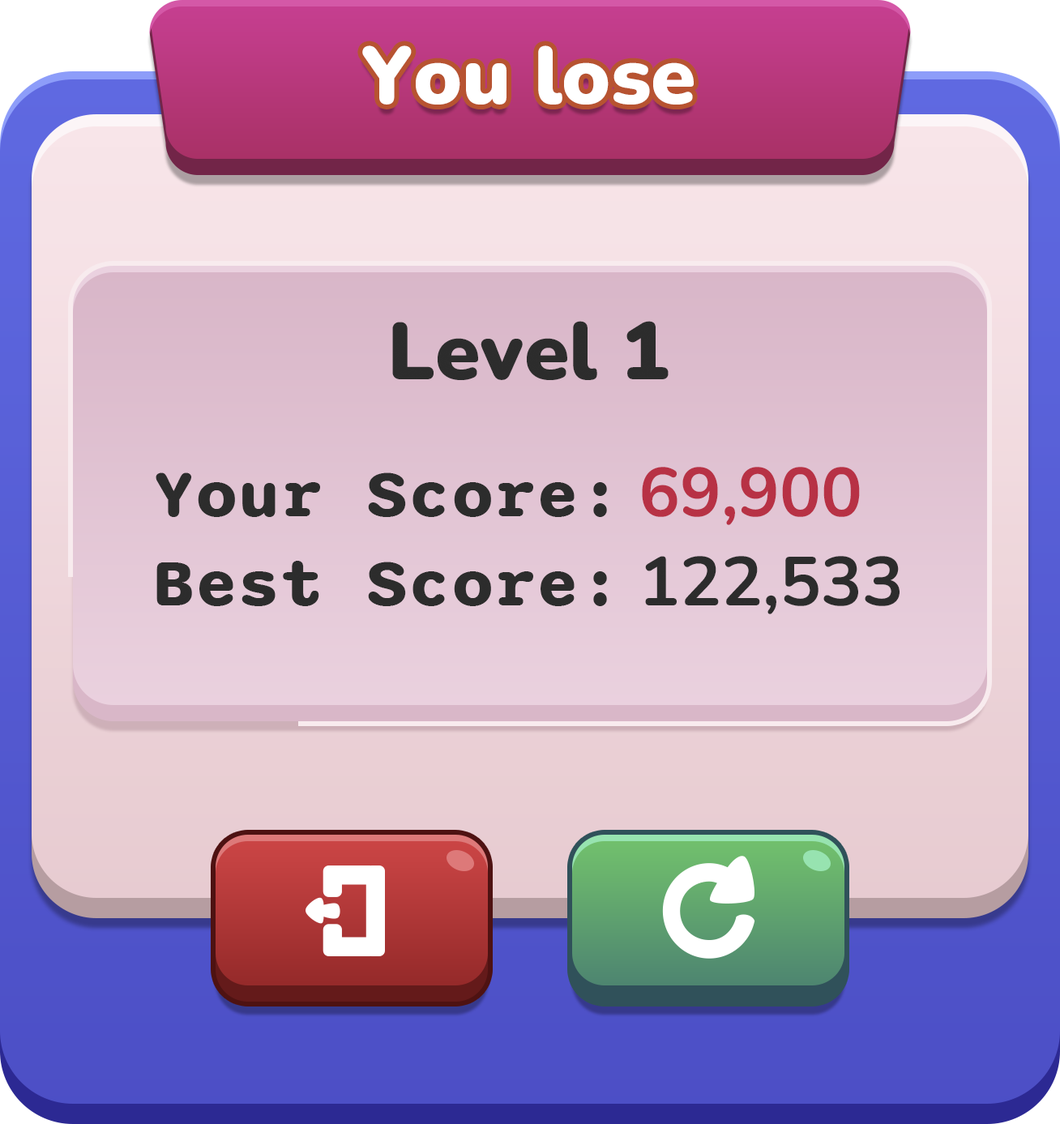
<style>
.page{position:relative;width:1060px;height:1124px}
.page>*{position:absolute;margin:0}
.t1{font:81.1px "Nunito-Black";color:#ffffff}
.t2{font:81.1px "Nunito-Black";color:#2c2c2c}
.t3{font:68.9px "Sono-Bold";color:#2c2c2c}
.t4{font:68.9px "Nunito-Bold";color:#b73245}
.t5{font:68.9px "Nunito-Bold";color:#2c2c2c}
</style>
<div class="page">
<p class="t1" style="left:362px;top:45px;width:332px;height:60px">You lose</p>
<p class="t2" style="left:392px;top:321px;width:277px;height:59px">Level 1</p>
<p class="t3" style="left:156px;top:473px;width:451px;height:44px">Your Score:</p>
<p class="t4" style="left:642px;top:467px;width:218px;height:58px">69,900</p>
<p class="t5" style="left:645px;top:556px;width:255px;height:59px">122,533</p>
<p class="t3" style="left:156px;top:561px;width:451px;height:45px">Best Score:</p>
</div>
